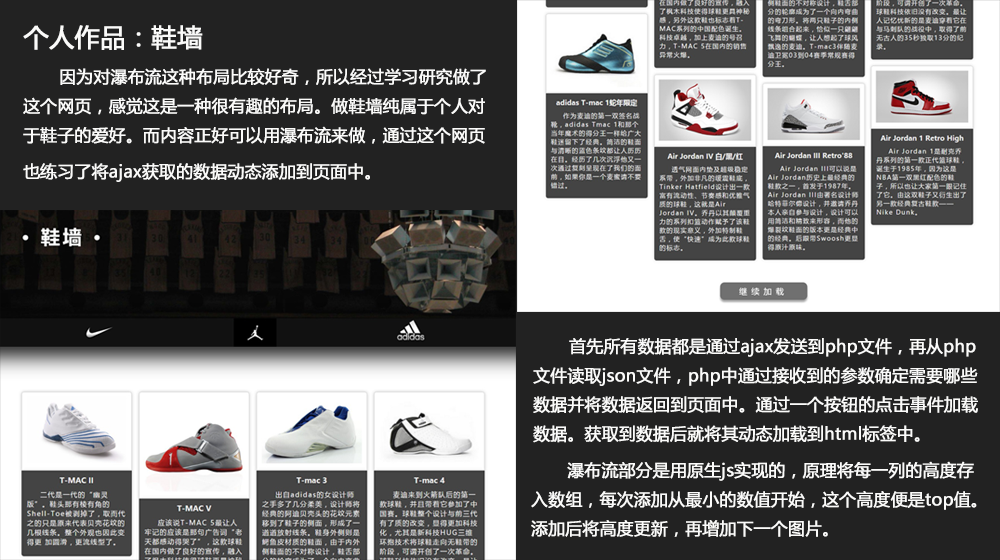
<style>
.page{position:relative;width:1000px;height:560px;background:#222222}
.page>*{position:absolute;margin:0}
.t1{font:16.7px "MicrosoftYaHei";color:#fbfbfa;font-weight:bold}
.t2{font:25px "MicrosoftYaHei";color:#fbfbfa;font-weight:bold}
</style>
<div class="page">
<p class="t1" style="left:23px;top:25px;width:463px;height:157px"><span class="t2">个人作品：鞋墙<br></span> 因为对瀑布流这种布局比较好奇，所以经过学习研究做了<br>这个网页，感觉这是一种很有趣的布局。做鞋墙纯属于个人对<br>于鞋子的爱好。而内容正好可以用瀑布流来做，通过这个网页<br>也练习了将ajax获取的数据动态添加到页面中。</p>
<p class="t1" style="left:533px;top:338px;width:445px;height:105px">首先所有数据都是通过ajax发送到php文件，再从php<br>文件读取json文件，php中通过接收到的参数确定需要哪些<br>数据并将数据返回到页面中。通过一个按钮的点击事件加载<br>数据。获取到数据后就将其动态加载到html标签中。</p>
<p class="t1" style="left:531px;top:461px;width:446px;height:76px">瀑布流部分是用原生js实现的，原理将每一列的高度存<br>入数组，每次添加从最小的数值开始，这个高度便是top值。<br>添加后将高度更新，再增加下一个图片。</p>
</div>
